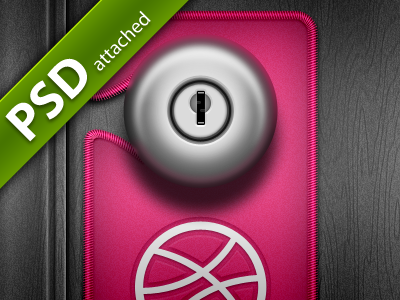
<style>
.page{position:relative;width:400px;height:300px}
.page>*{position:absolute;margin:0}
.t1{font:20px "MyriadPro-Regular";color:#ffffff}
.t2{font:52.6px "MyriadPro-Bold";color:#ffffff}
</style>
<div class="page">
<p class="t1" style="left:5px;top:10px;width:146px;height:132px;rotate:-45deg"><span class="t2">PSD </span>attached</p>
</div>
